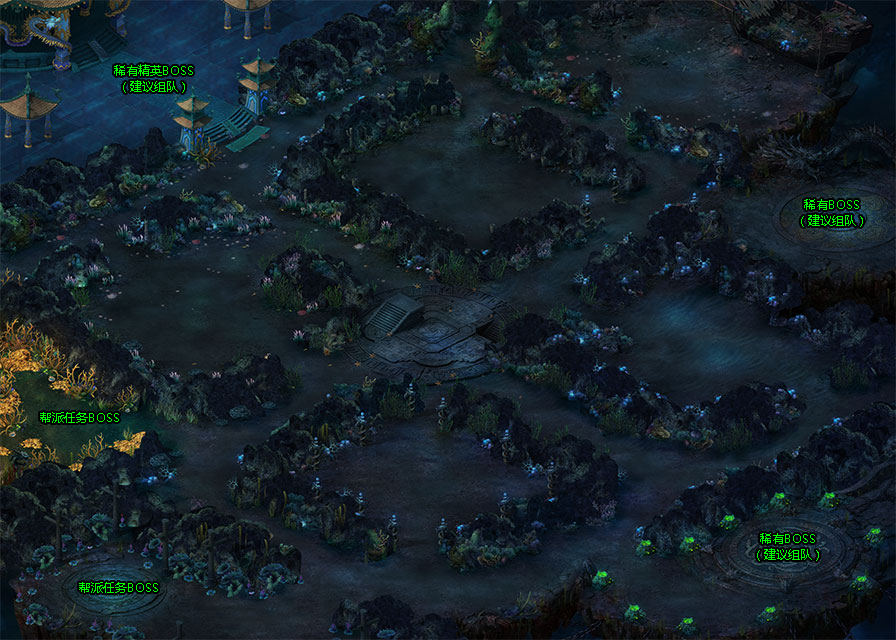
<style>
.page{position:relative;width:896px;height:640px}
.page>*{position:absolute;margin:0}
.t1{font:12px/16px "MicrosoftYaHei";color:#00ff00}
.t2{font:12px "MicrosoftYaHei";color:#00ff00}
</style>
<div class="page">
<p class="t1" style="left:114px;top:64px;width:79px;height:29px;text-align:center">稀有精英BOSS<br>（建议组队）</p>
<p class="t1" style="left:801px;top:199px;width:62px;height:28px;text-align:center">稀有BOSS<br>（建议组队）</p>
<p class="t2" style="left:40px;top:412px;width:79px;height:11px">帮派任务BOSS</p>
<p class="t1" style="left:757px;top:533px;width:62px;height:28px;text-align:center">稀有BOSS<br>（建议组队）</p>
<p class="t2" style="left:79px;top:582px;width:79px;height:11px">帮派任务BOSS</p>
</div>
